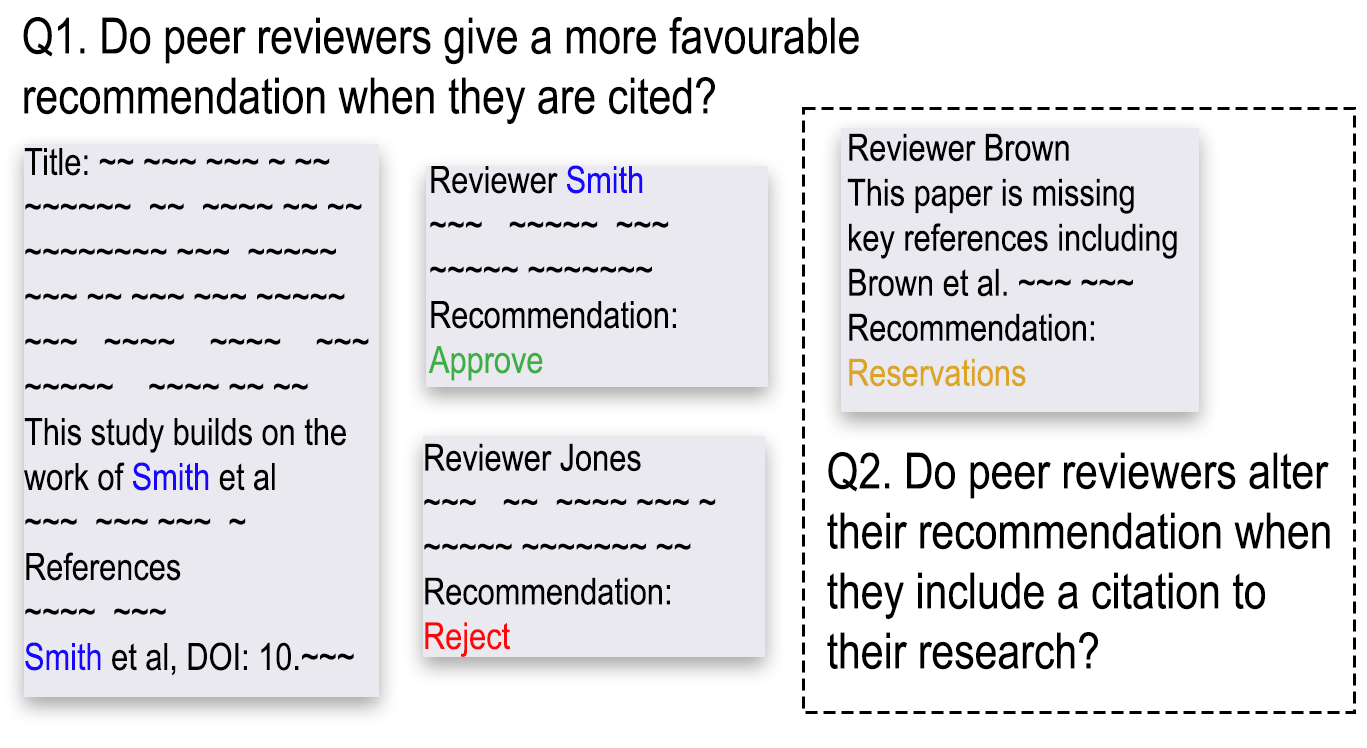
<style>
.page{position:relative;width:1367px;height:748px;background:#eae9ef}
.page>*{position:absolute;margin:0}
.t1{font:50px "ArialNarrow";color:#000000}
.t2{font:37.5px "ArialNarrow";color:#000000}
.t3{font:37.5px "ArialNarrow";color:#dba523}
.t4{font:37.5px "ArialNarrow";color:#1707fe}
.t5{font:37.5px "ArialNarrow";color:#3baf43}
.t6{font:37.2px "ArialNarrow";color:#000000}
.t7{font:37.2px "ArialNarrow";color:#fe070b}
</style>
<div class="page">
<p class="t1" style="left:23px;top:17px;width:836px;height:108px">Q1. Do peer reviewers give a more favourable <br>recommendation when they are cited?</p>
<p class="t2" style="left:847px;top:133px;width:330px;height:254px">Reviewer Brown<br>This paper is missing key references including Brown et al. ~~~ ~~~<br>Recommendation:<br><span class="t3">Reservations</span></p>
<p class="t2" style="left:24px;top:148px;width:345px;height:528px">Title: ~~ ~~~ ~~~ ~ ~~<br>~~~~~~  ~~  ~~~~ ~~ ~~<br>~~~~~~~~ ~~~  ~~~~~<br>~~~ ~~ ~~~ ~~~ ~~~~~<br>~~~   ~~~~    ~~~~    ~~~<br>~~~~~    ~~~~ ~~ ~~<br>This study builds on the work of <span class="t4">Smith </span>et al<br>~~~  ~~~ ~~~  ~ <br>References<br>~~~~  ~~~<br><span class="t4">Smith </span>et al, DOI: 10.~~~</p>
<p class="t2" style="left:428px;top:165px;width:248px;height:216px">Reviewer <span class="t4">Smith<br></span>~~~   ~~~~~  ~~~<br>~~~~~ ~~~~~~~ <br>Recommendation:<br><span class="t5">Approve</span></p>
<p class="t6" style="left:424px;top:443px;width:292px;height:214px">Reviewer Jones<br>~~~   ~~  ~~~~ ~~~ ~<br>~~~~~ ~~~~~~~ ~~<br>Recommendation:<br><span class="t7">Reject</span></p>
<p class="t1" style="left:827px;top:452px;width:503px;height:218px">Q2. Do peer reviewers alter <br>their recommendation when <br>they include a citation to <br>their research?</p>
</div>
